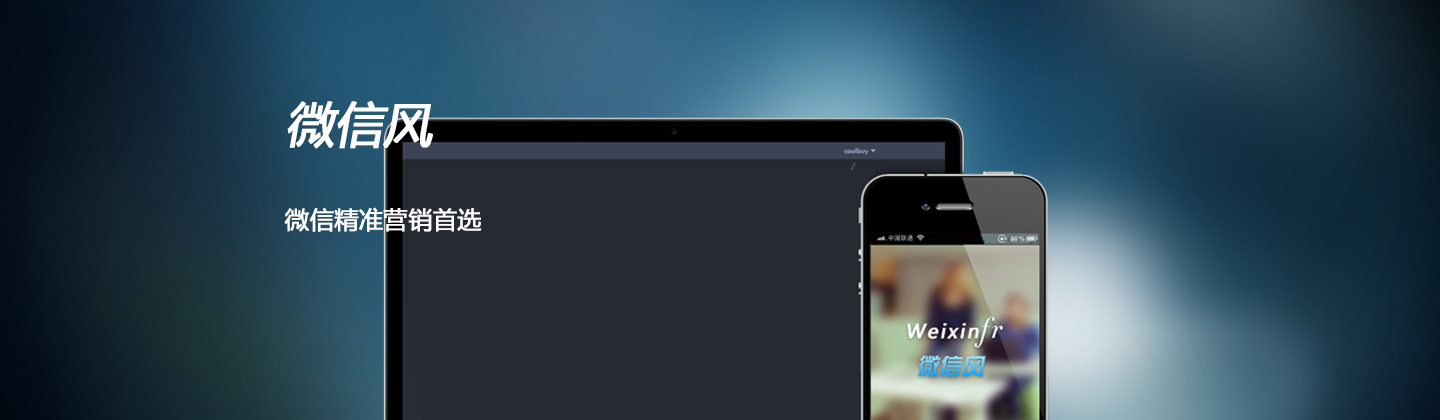
<style>
.page{position:relative;width:1440px;height:420px}
.page>*{position:absolute;margin:0}
.t1{font:24px "MicrosoftYaHei";color:#ffffff;font-weight:bold}
.t2{font:48px "MicrosoftYaHei";color:#ffffff;font-weight:bold;font-style:italic}
</style>
<div class="page">
<p class="t1" style="left:284px;top:101px;width:198px;height:131px"><span class="t2">微信风<br><br></span>微信精准营销首选</p>
</div>
